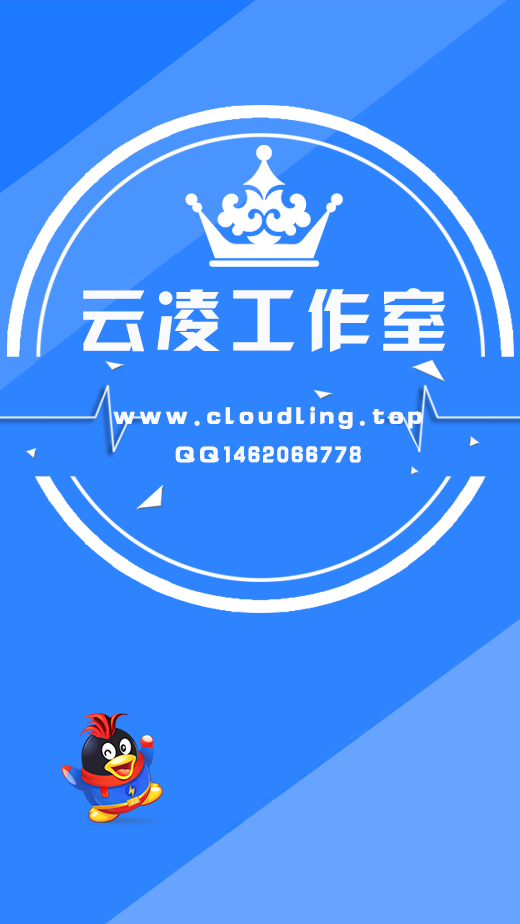
<style>
.page{position:relative;width:520px;height:924px;background:#2e83ff}
.page>*{position:absolute;margin:0}
.t1{font:68px "JLinXin";letter-spacing:0.1em;color:#f9fafb}
.t2{font:25px "JLinXin";letter-spacing:0.1em;color:#f9fafb}
.t3{font:24px "JLinXin";letter-spacing:0.1em;color:#f9fafb}
</style>
<div class="page">
<p class="t1" style="left:83px;top:288px;width:363px;height:64px">云凌工作室</p>
<p class="t2" style="left:113px;top:406px;width:309px;height:23px">www.cloudling.top</p>
<p class="t3" style="left:175px;top:446px;width:186px;height:17px">QQ1462066778</p>
</div>
